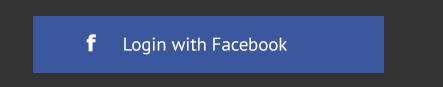
<style>
.page{position:relative;width:443px;height:87px;background:#3b579d}
.page>*{position:absolute;margin:0}
.t1{font:18.2px "PTSans-Regular";color:#ffffff}
</style>
<div class="page">
<p class="t1" style="left:124px;top:37px;width:163px;height:18px">Login with Facebook</p>
</div>
